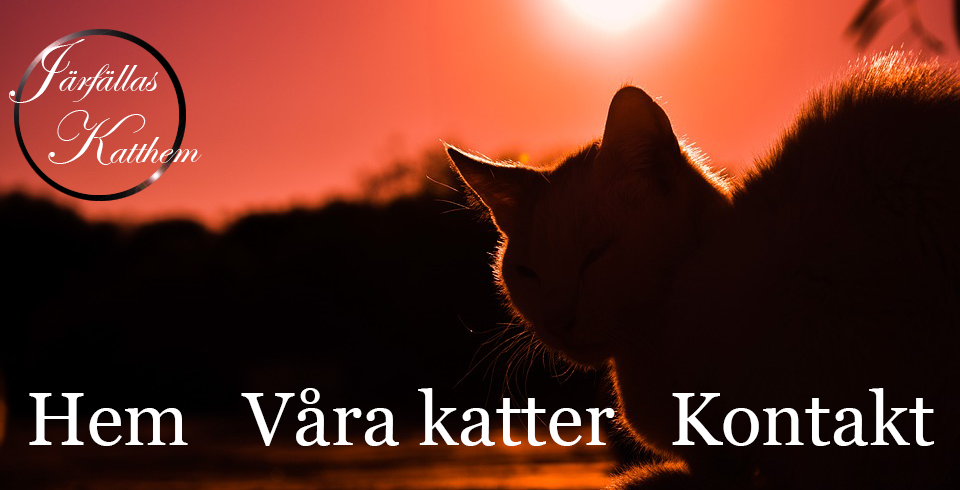
<style>
.page{position:relative;width:960px;height:490px}
.page>*{position:absolute;margin:0}
.t1{font:50px "EdwardianScriptITC";color:#ffffff}
.t2{font:75px "EdwardianScriptITC";color:#ffffff}
.t3{font:12px "EdwardianScriptITC";color:#ffffff}
.t4{font:75px "Georgia";color:#ffffff}
</style>
<div class="page">
<p class="t1" style="left:9px;top:39px;width:149px;height:64px"><span class="t2">J</span>ärfällas</p>
<p class="t3" style="left:48px;top:110px;width:154px;height:55px"><span class="t2">K</span>atthem</p>
<p class="t4" style="left:29px;top:388px;width:905px;height:58px">Hem   Våra katter   Kontakt</p>
</div>
